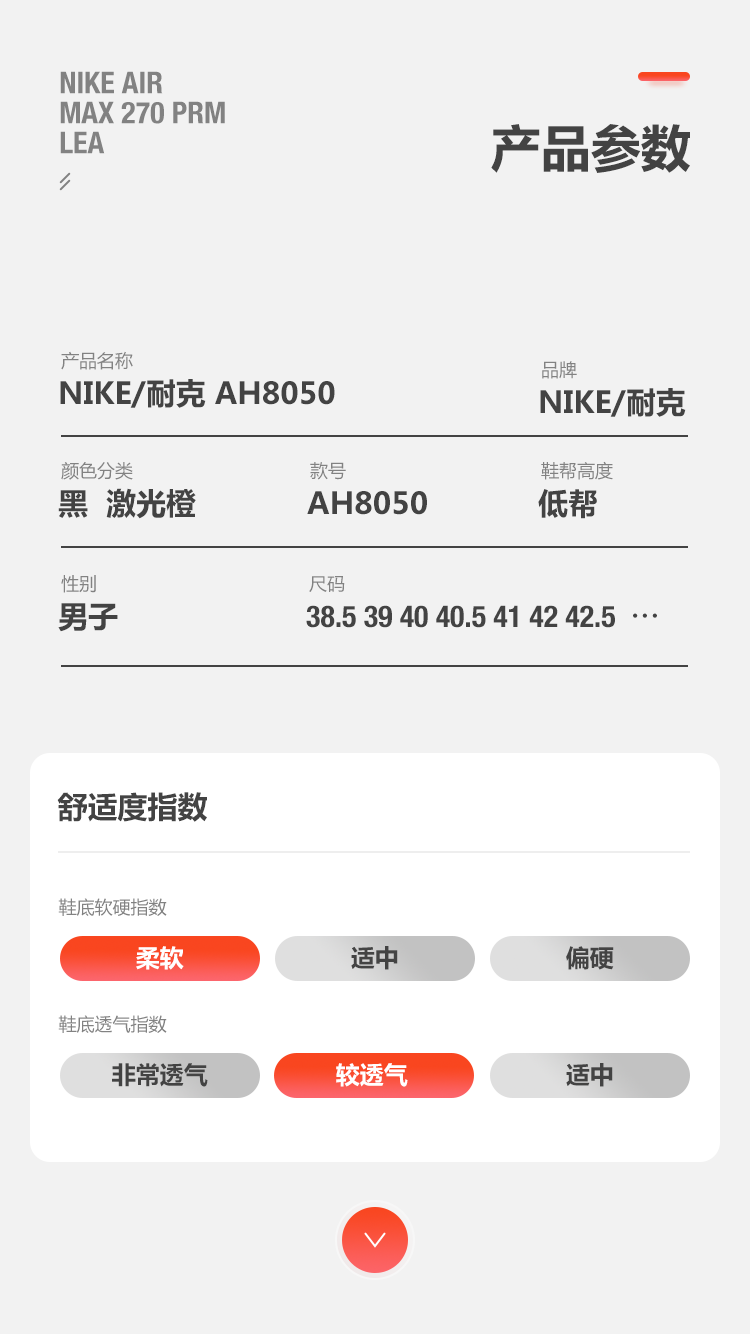
<style>
.page{position:relative;width:750px;height:1334px;background:#f2f2f2}
.page>*{position:absolute;margin:0}
.t1{font:30px/30px "HelveticaNeue-CondensedBold";color:#828282;text-transform:uppercase}
.t2{font:50px "MicrosoftYaHei-Bold";color:#434343;text-transform:uppercase}
.t3{font:18px "MicrosoftYaHei";color:#828282;text-transform:uppercase}
.t4{font:30px "MicrosoftYaHei-Bold";color:#434343;text-transform:uppercase}
.t5{font:30px "HelveticaNeue-CondensedBold";color:#434343;text-transform:uppercase}
.t6{font:30px "AdobeHeitiStd-Regular";color:#434343;text-transform:uppercase}
.t7{font:24px "MicrosoftYaHei-Bold";color:#ffffff;text-transform:uppercase}
.t8{font:24px "MicrosoftYaHei-Bold";color:#434343;text-transform:uppercase}
</style>
<div class="page">
<p class="t1" style="left:60px;top:71px;width:165px;height:83px">Nike Air <br>Max 270 PRM <br>LEA</p>
<p class="t2" style="left:491px;top:124px;width:199px;height:49px">产品参数</p>
<p class="t3" style="left:61px;top:351px;width:72px;height:19px">产品名称</p>
<p class="t3" style="left:542px;top:361px;width:35px;height:18px">品牌</p>
<p class="t4" style="left:60px;top:379px;width:275px;height:29px">Nike/耐克 AH8050</p>
<p class="t4" style="left:540px;top:388px;width:146px;height:29px">Nike/耐克</p>
<p class="t3" style="left:61px;top:462px;width:72px;height:18px">颜色分类</p>
<p class="t3" style="left:310px;top:462px;width:36px;height:18px">款号</p>
<p class="t3" style="left:541px;top:461px;width:72px;height:19px">鞋帮高度</p>
<p class="t4" style="left:58px;top:488px;width:138px;height:31px">黑  激光橙</p>
<p class="t4" style="left:307px;top:491px;width:120px;height:24px">AH8050</p>
<p class="t4" style="left:538px;top:489px;width:59px;height:30px">低帮</p>
<p class="t3" style="left:61px;top:575px;width:35px;height:18px">性别</p>
<p class="t3" style="left:309px;top:576px;width:36px;height:16px">尺码</p>
<p class="t4" style="left:58px;top:603px;width:60px;height:29px">男子</p>
<p class="t5" style="left:306px;top:605px;width:351px;height:23px">38.5 39 40 40.5 41 42 42.5  <span class="t6">…</span></p>
<p class="t4" style="left:57px;top:792px;width:150px;height:30px">舒适度指数</p>
<p class="t3" style="left:58px;top:898px;width:109px;height:18px">鞋底软硬指数</p>
<p class="t7" style="left:136px;top:946px;width:48px;height:24px">柔软</p>
<p class="t8" style="left:351px;top:946px;width:47px;height:24px">适中</p>
<p class="t8" style="left:566px;top:946px;width:48px;height:24px">偏硬</p>
<p class="t3" style="left:58px;top:1015px;width:109px;height:18px">鞋底透气指数</p>
<p class="t8" style="left:112px;top:1063px;width:96px;height:24px">非常透气</p>
<p class="t7" style="left:336px;top:1063px;width:72px;height:24px">较透气</p>
<p class="t8" style="left:566px;top:1063px;width:47px;height:24px">适中</p>
</div>
